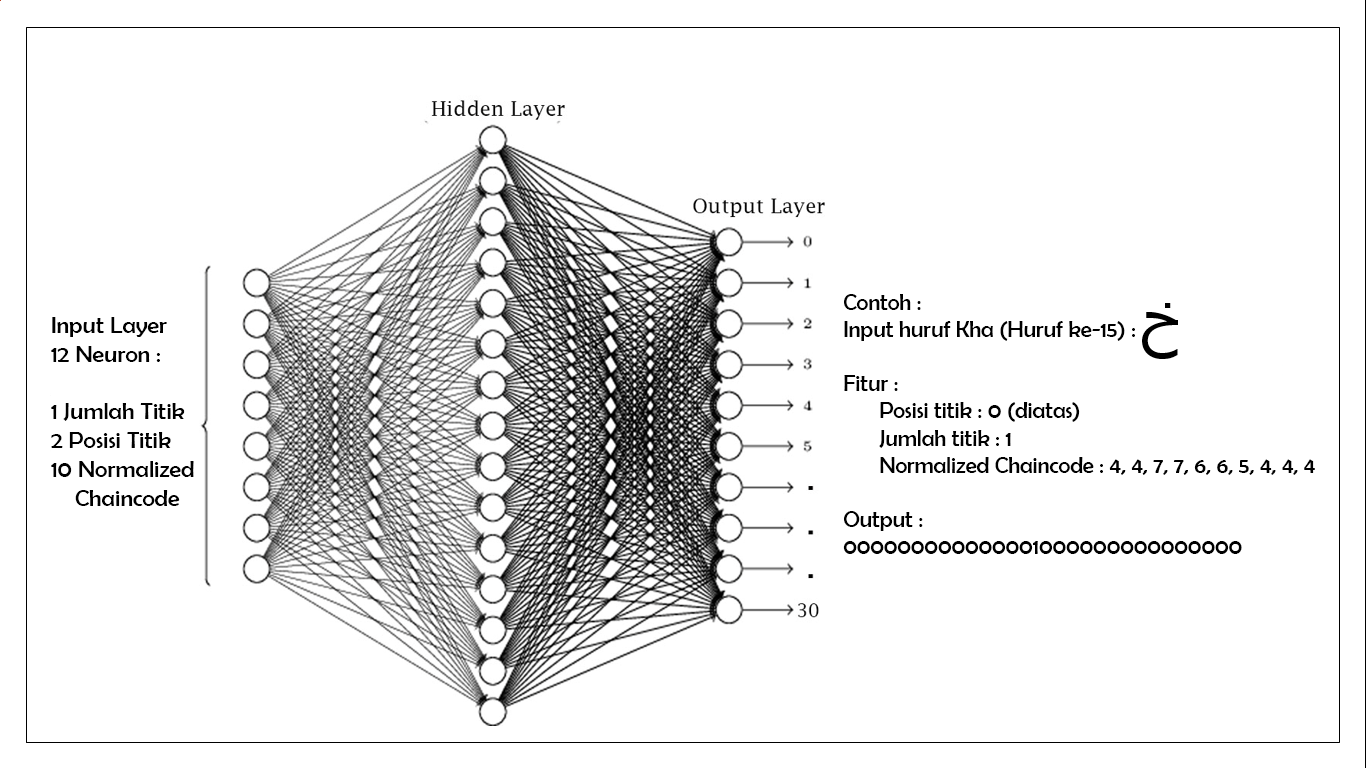
<style>
.page{position:relative;width:1366px;height:768px;background:#ffffff}
.page>*{position:absolute;margin:0}
.t1{font:22.7px "BerlinSansFB-Reg";color:#000000}
.t2{font:24px "BerlinSansFB-Reg";color:#000000}
</style>
<div class="page">
<p class="t1" style="left:843px;top:294px;width:472px;height:260px">Contoh :<br>Input huruf Kha (Huruf ke-15) :<br><br>Fitur :<br> Posisi titik : 0 (diatas)<br> Jumlah titik : 1 <br> Normalized Chaincode : 4, 4, 7, 7, 6, 6, 5, 4, 4, 4  <br><br>Output : <br>000000000000001000000000000000</p>
<p class="t2" style="left:51px;top:317px;width:143px;height:189px">Input Layer<br>12 Neuron :<br><br>1 Jumlah Titik<br>2 Posisi Titik<br>10 Normalized <br>    Chaincode</p>
</div>
